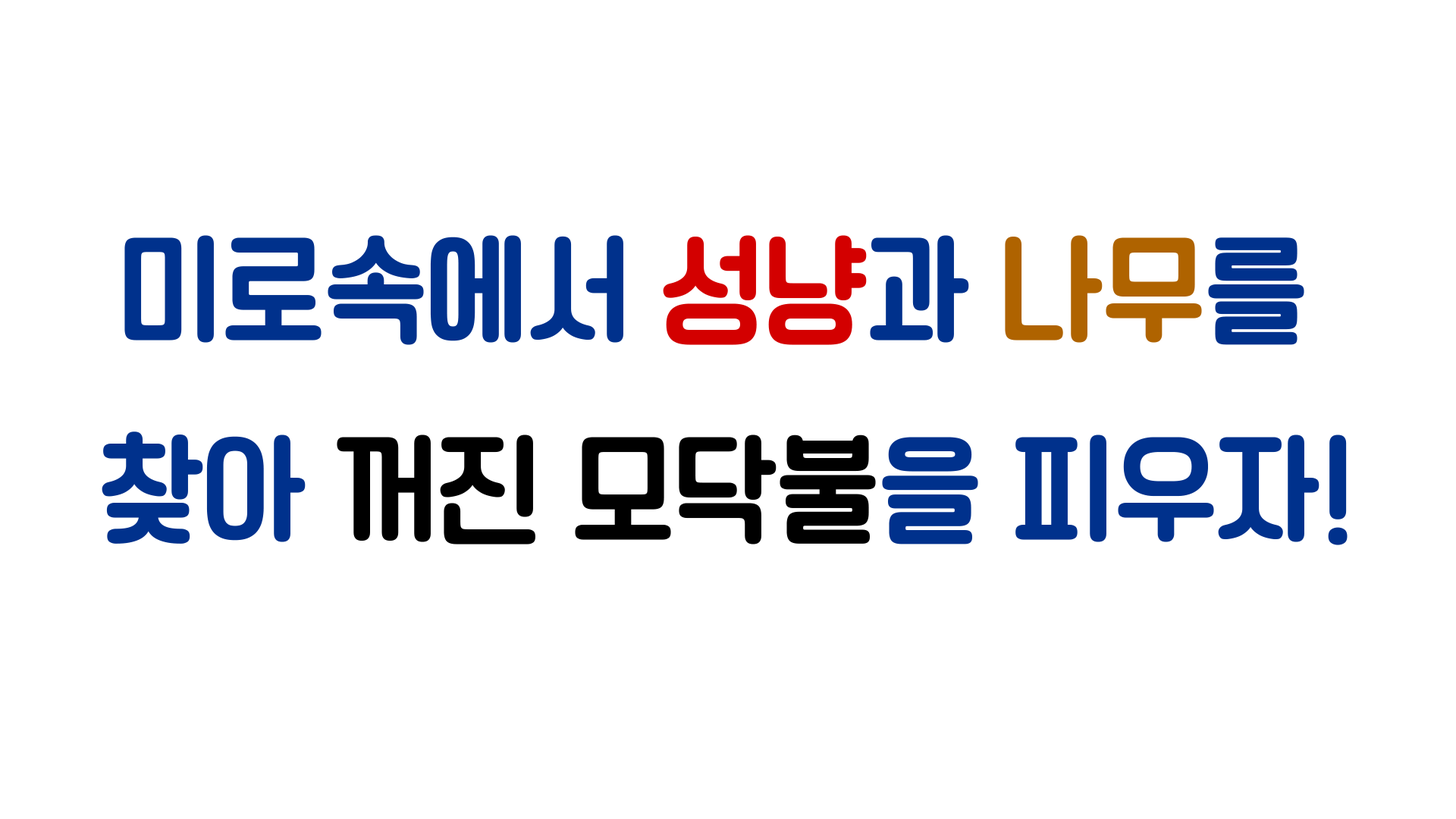
<style>
.page{position:relative;width:1456px;height:819px;background:#ffffff}
.page>*{position:absolute;margin:0}
.t1{font:113.7px "TTChungchunsidaeR";color:#000000}
.t2{font:113.7px "TTChungchunsidaeR";color:#00318c}
.t3{font:113.7px "TTChungchunsidaeR";color:#d30000}
.t4{font:113.7px "TTChungchunsidaeR";color:#af6300}
</style>
<div class="page">
<p class="t1" style="left:102px;top:235px;width:1246px;height:310px;text-align:center"><span class="t2">미로속에서 </span><span class="t3">성냥</span><span class="t2">과 </span><span class="t4">나무</span><span class="t2">를 <br>찾아 </span>꺼진 모닥불<span class="t2">을 피우자!</span></p>
</div>
